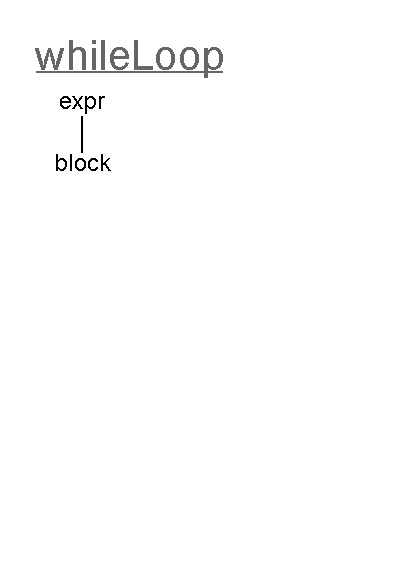
<style>
.page{position:relative;width:396px;height:576px;background:#ffffff}
.page>*{position:absolute;margin:0}
.t1{font:42px "ArialMT";color:#666666}
.t2{font:24px "ArialMT";color:#000000}
.t3{font:12px "ArialMT";color:#000000}
</style>
<div class="page">
<p class="t1" style="left:35px;top:40px;width:188px;height:38px">whileLoop</p>
<p class="t2" style="left:60px;top:96px;width:45px;height:18px">expr</p>
<p class="t3" style="left:56px;top:154px;width:55px;height:17px">block</p>
</div>
